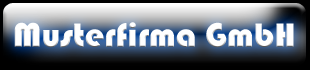
<style>
.page{position:relative;width:310px;height:70px}
.page>*{position:absolute;margin:0}
.t1{font:35px "Bauhaus93";color:#ffffff}
</style>
<div class="page">
<p class="t1" style="left:14px;top:22px;width:280px;height:26px">Musterfirma GmbH</p>
</div>
